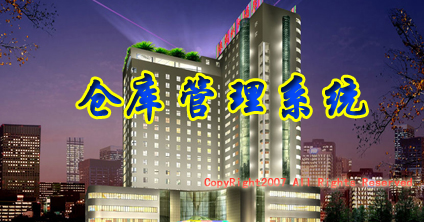
<style>
.page{position:relative;width:424px;height:222px}
.page>*{position:absolute;margin:0}
.t1{font:48px "STXingkai";font-weight:bold}
.t2{font:12px "SimHei";font-weight:bold}
</style>
<div class="page">
<p class="t1" style="left:78px;top:73px;width:288px;height:49px">仓库管理系统</p>
<p class="t2" style="left:204px;top:178px;width:208px;height:10px">CopyRight2007 All Rights Reserved</p>
</div>
